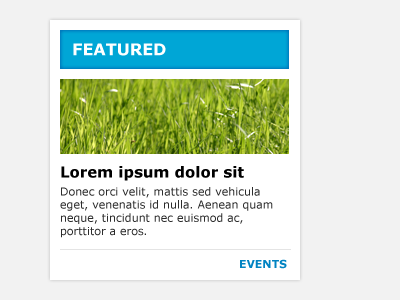
<style>
.page{position:relative;width:400px;height:300px;background:#f2f2f2}
.page>*{position:absolute;margin:0}
.t1{font:16px "Verdana-Bold";color:#ffffff;text-transform:uppercase}
.t2{font:11px "Verdana";color:#2c2c2c}
.t3{font:15px/24px "Verdana-Bold";color:#000000}
.t4{font:11px/18px "Verdana";color:#2c2c2c}
.t5{font:11px/33px "Verdana-Bold";color:#0083c2}
</style>
<div class="page">
<p class="t1" style="left:73px;top:43px;width:93px;height:13px">Featured</p>
<p class="t2" style="left:60px;top:166px;width:227px;height:103px"><span class="t3">Lorem ipsum dolor sit<br></span><span class="t4">Donec orci velit, mattis sed vehicula </span>eget, venenatis id nulla. Aenean quam neque, tincidunt nec euismod ac, porttitor a eros. <br><span class="t5">EVENTS</span></p>
</div>
